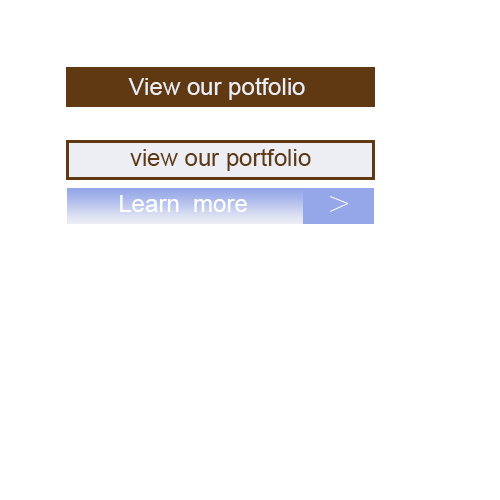
<style>
.page{position:relative;width:500px;height:500px;background:#ffffff}
.page>*{position:absolute;margin:0}
.t1{font:24px "ArialMT";color:#eceef4}
.t2{font:24px "ArialMT";color:#603913}
.t3{font:24px "ArialMT";color:#ffffff}
</style>
<div class="page">
<p class="t1" style="left:128px;top:77px;width:177px;height:23px">View our potfolio</p>
<p class="t2" style="left:130px;top:148px;width:181px;height:23px">view our portfolio</p>
<p class="t3" style="left:120px;top:195px;width:127px;height:17px">Learn  more</p>
</div>
